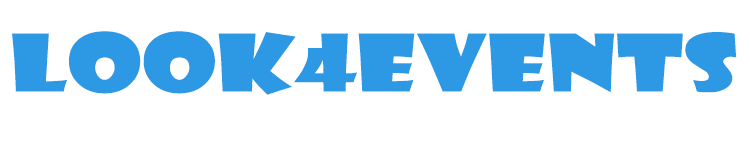
<style>
.page{position:relative;width:750px;height:150px;background:#ffffff}
.page>*{position:absolute;margin:0}
.t1{font:77px "ShowcardGothic-Reg";color:#2d99e4;scale:1.4 1}
</style>
<div class="page">
<p class="t1" style="left:12px;top:31px;width:725px;height:64px">look4events</p>
</div>
